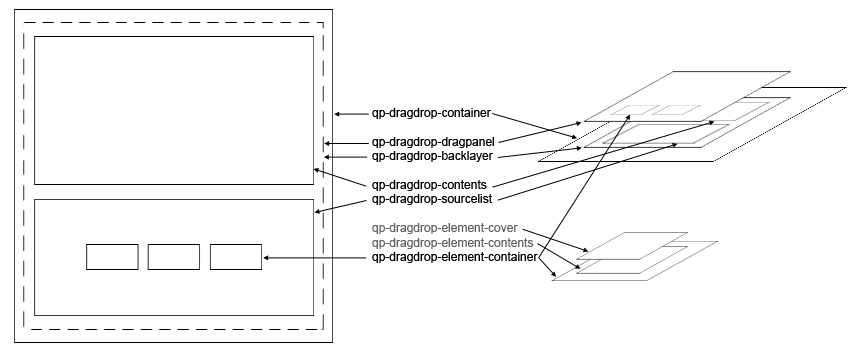
<style>
.page{position:relative;width:858px;height:358px;background:#ffffff}
.page>*{position:absolute;margin:0}
.t1{font:12px "ArialMT";color:#000000}
.t2{font:12px "ArialMT";color:#626262}
</style>
<div class="page">
<p class="t1" style="left:372px;top:108px;width:166px;height:155px">qp-dragdrop-container<br><br>qp-dragdrop-dragpanel<br>qp-dragdrop-backlayer<br><br>qp-dragdrop-contents<br>qp-dragdrop-sourcelist<br><br><span class="t2">qp-dragdrop-element-cover<br>qp-dragdrop-element-contents<br></span>qp-dragdrop-element-container</p>
</div>
